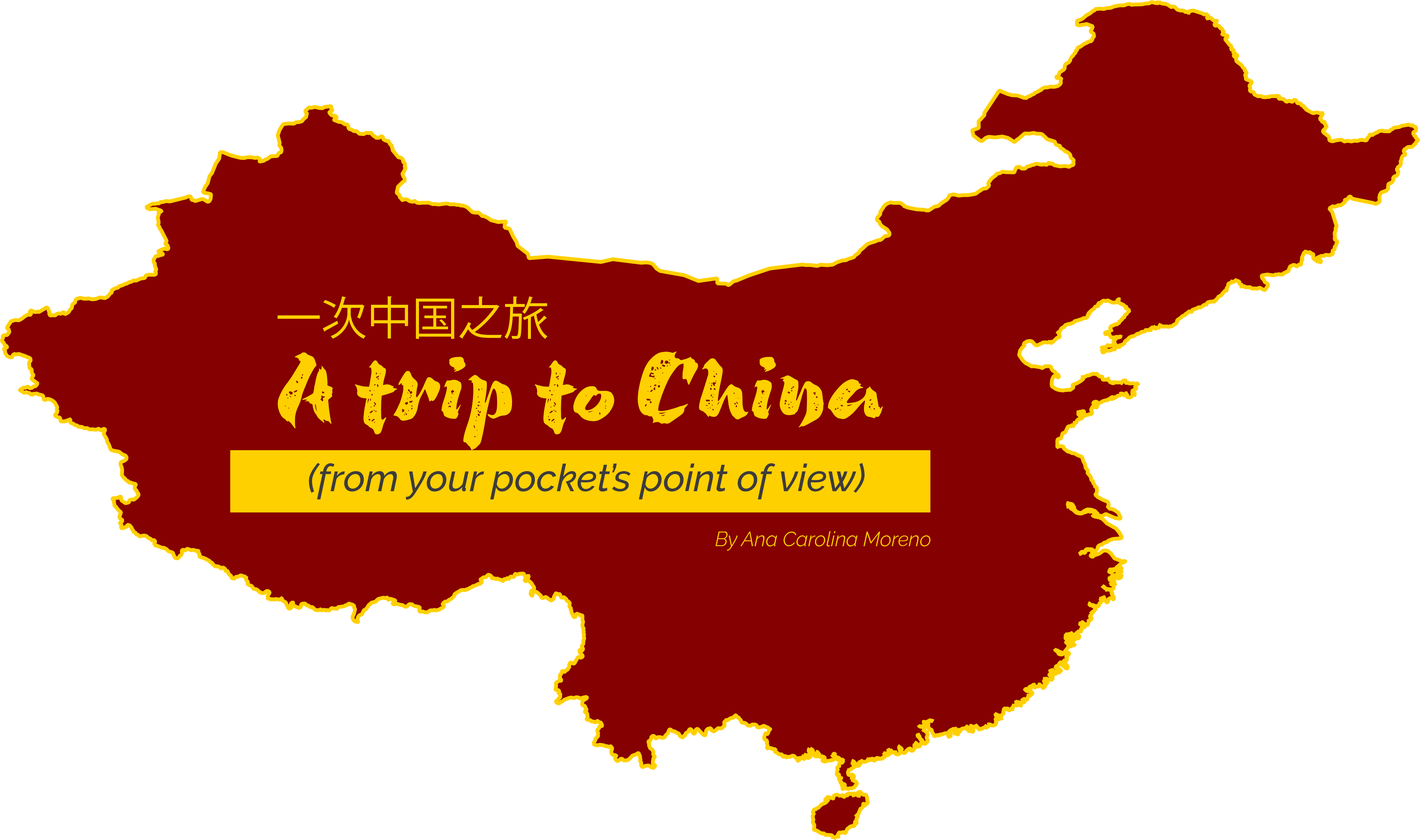
<style>
.page{position:relative;width:1420px;height:840px;background:#ffffff}
.page>*{position:absolute;margin:0}
.t1{font:45.5px "KozGoPr6N-Regular";color:#ffd000}
.t2{font:75.9px "NinjaKageDemo-Rough";color:#ffd000}
.t3{font:37.9px "RalewayItalic-MediumItalic";color:#3d3b3b}
.t4{font:20.2px "RalewayItalic-LightItalic";color:#ffd000}
</style>
<div class="page">
<p class="t1" style="left:278px;top:296px;width:270px;height:43px">一次中国之旅</p>
<p class="t2" style="left:278px;top:351px;width:605px;height:99px">A trip to China</p>
<p class="t3" style="left:309px;top:463px;width:556px;height:36px">(from your pocket’s point of view)</p>
<p class="t4" style="left:715px;top:531px;width:216px;height:20px">By Ana Carolina Moreno</p>
</div>
